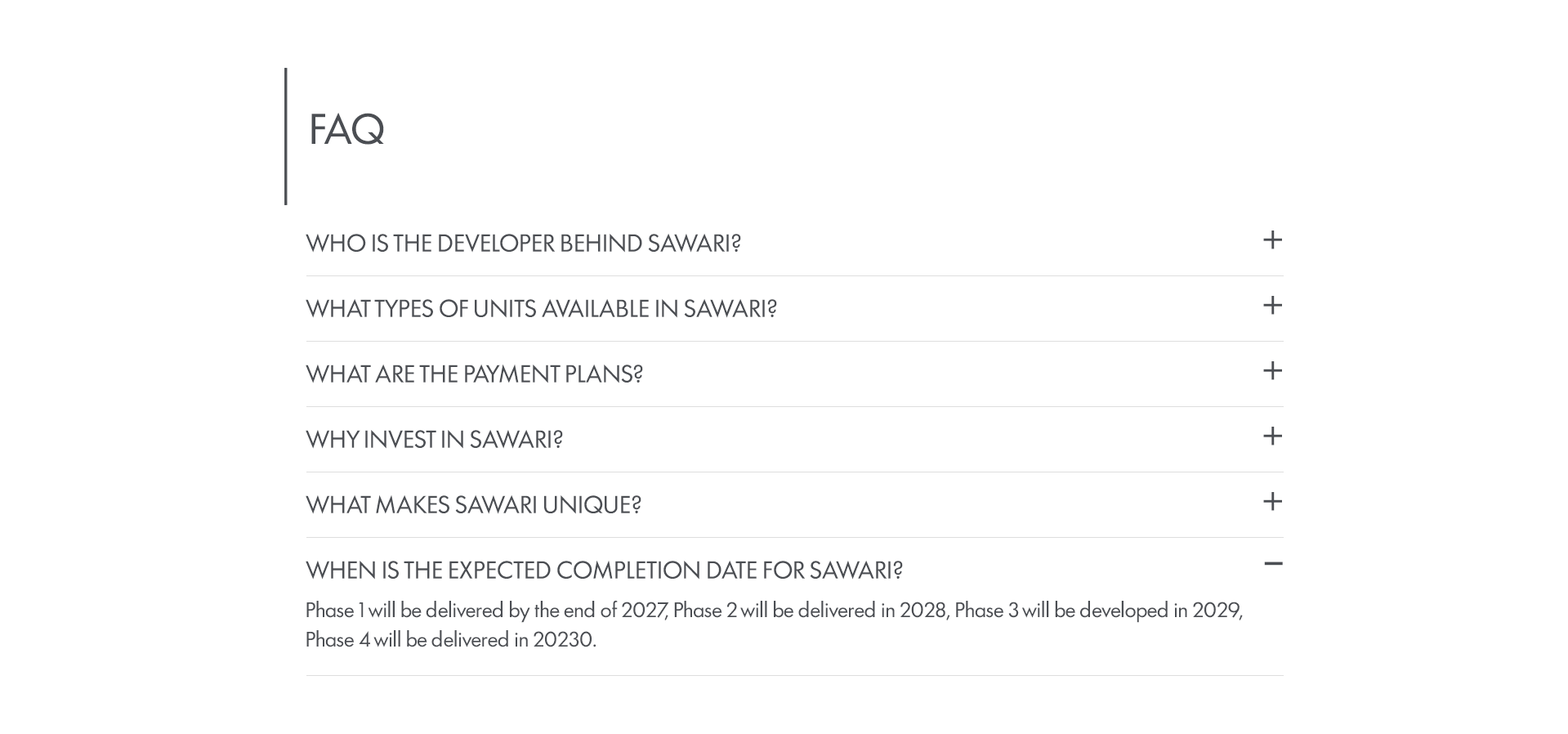
<style>
.page{position:relative;width:1568px;height:734px;background:#ffffff}
.page>*{position:absolute;margin:0}
.t1{font:39.8px "Futura100-Regular";color:#4b4e53;text-transform:uppercase}
.t2{font:22.9px "Futura100-Regular";color:#4b4e53;text-transform:uppercase}
.t3{font:37.6px "Futura100-Regular";color:#4b4e53;text-transform:uppercase}
.t4{font:37.6px "Futura100-Regular";color:#4b4e53;text-transform:uppercase;scale:1.7 1}
.t5{font:19.6px/29.4px "Futura100-Regular";color:#4b4e53}
</style>
<div class="page">
<p class="t1" style="left:311px;top:113px;width:73px;height:32px">FAQ</p>
<p class="t2" style="left:306px;top:234px;width:435px;height:18px">WHO IS THE DEVELOPER BEHIND SAWARI?</p>
<p class="t3" style="left:1263px;top:230px;width:19px;height:19px">+</p>
<p class="t2" style="left:306px;top:299px;width:471px;height:19px">WHAT TYPES OF UNITS AVAILABLE IN SAWARI?</p>
<p class="t3" style="left:1263px;top:296px;width:19px;height:19px">+</p>
<p class="t2" style="left:306px;top:364px;width:337px;height:19px">WHAT ARE THE PAYMENT PLANS?</p>
<p class="t3" style="left:1263px;top:361px;width:19px;height:19px">+</p>
<p class="t2" style="left:306px;top:430px;width:257px;height:19px">WHY INVEST IN SAWARI?</p>
<p class="t3" style="left:1263px;top:427px;width:19px;height:18px">+</p>
<p class="t2" style="left:306px;top:495px;width:335px;height:19px">WHAT MAKES SAWARI UNIQUE?</p>
<p class="t3" style="left:1263px;top:492px;width:19px;height:19px">+</p>
<p class="t2" style="left:306px;top:561px;width:597px;height:18px">WHEN IS THE EXPECTED COMPLETION DATE FOR SAWARI?</p>
<p class="t4" style="left:1264px;top:561px;width:19px;height:4px">-</p>
<p class="t5" style="left:306px;top:600px;width:937px;height:47px">Phase 1 will be delivered by the end of 2027, Phase 2 will be delivered in 2028, Phase 3 will be developed in 2029,<br>Phase 4 will be delivered in 20230.</p>
</div>
